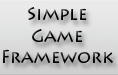
<style>
.page{position:relative;width:118px;height:75px}
.page>*{position:absolute;margin:0}
.t1{font:18px "LithosPro-Regular";color:#000000}
</style>
<div class="page">
<p class="t1" style="left:2px;top:7px;width:111px;height:57px;text-align:center">Simple<br>Game<br>Framework</p>
</div>
